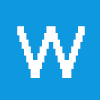
<style>
.page{position:relative;width:100px;height:100px;background:#0e98e0}
.page>*{position:absolute;margin:0}
.t1{font:72px "MS Sans Serif";color:#fffefe}
</style>
<div class="page">
<p class="t1" style="left:17px;top:26px;width:68px;height:52px">W</p>
</div>
